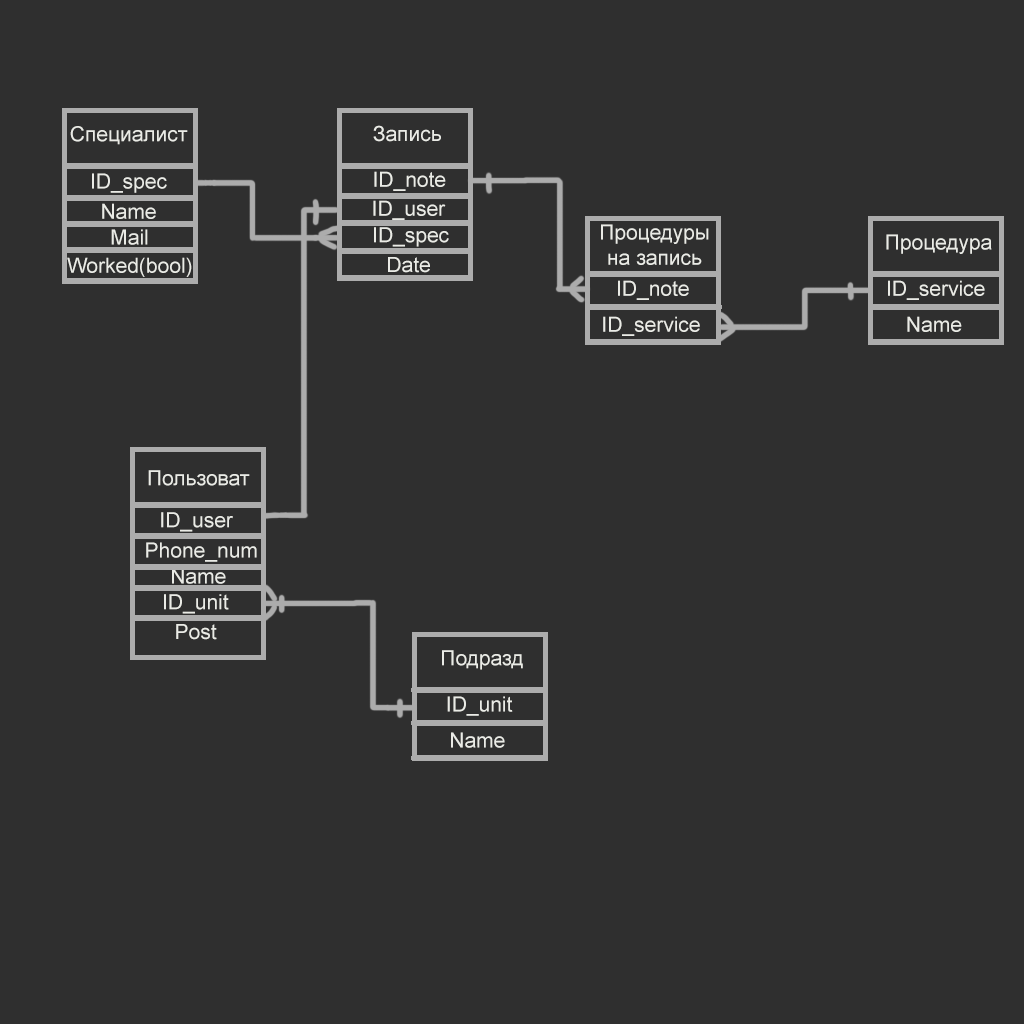
<style>
.page{position:relative;width:1024px;height:1024px;background:#2f2f2f}
.page>*{position:absolute;margin:0}
.t1{font:21px "ArialMT";color:#eaebe6}
</style>
<div class="page">
<p class="t1" style="left:70px;top:126px;width:118px;height:19px">Специалист</p>
<p class="t1" style="left:373px;top:125px;width:68px;height:17px">Запись</p>
<p class="t1" style="left:92px;top:173px;width:75px;height:20px">ID_spec</p>
<p class="t1" style="left:374px;top:171px;width:72px;height:20px">ID_note</p>
<p class="t1" style="left:102px;top:203px;width:54px;height:16px">Name</p>
<p class="t1" style="left:373px;top:200px;width:73px;height:20px">ID_user</p>
<p class="t1" style="left:111px;top:229px;width:37px;height:16px">Mail</p>
<p class="t1" style="left:374px;top:227px;width:75px;height:20px">ID_spec</p>
<p class="t1" style="left:601px;top:224px;width:108px;height:41px;text-align:center">Процедуры<br>на запись</p>
<p class="t1" style="left:886px;top:234px;width:106px;height:20px">Процедура</p>
<p class="t1" style="left:67px;top:257px;width:125px;height:20px">Worked(bool)</p>
<p class="t1" style="left:388px;top:257px;width:42px;height:16px">Date</p>
<p class="t1" style="left:618px;top:280px;width:71px;height:20px">ID_note</p>
<p class="t1" style="left:888px;top:280px;width:97px;height:20px">ID_service</p>
<p class="t1" style="left:603px;top:316px;width:97px;height:20px">ID_service</p>
<p class="t1" style="left:907px;top:316px;width:55px;height:16px">Name</p>
<p class="t1" style="left:148px;top:470px;width:102px;height:16px">Пользоват</p>
<p class="t1" style="left:161px;top:512px;width:72px;height:20px">ID_user</p>
<p class="t1" style="left:146px;top:542px;width:111px;height:20px">Phone_num</p>
<p class="t1" style="left:172px;top:568px;width:54px;height:16px">Name</p>
<p class="t1" style="left:164px;top:594px;width:65px;height:20px">ID_unit</p>
<p class="t1" style="left:176px;top:624px;width:41px;height:16px">Post</p>
<p class="t1" style="left:442px;top:650px;width:81px;height:20px">Подразд</p>
<p class="t1" style="left:447px;top:696px;width:66px;height:20px">ID_unit</p>
<p class="t1" style="left:451px;top:732px;width:54px;height:16px">Name</p>
</div>
